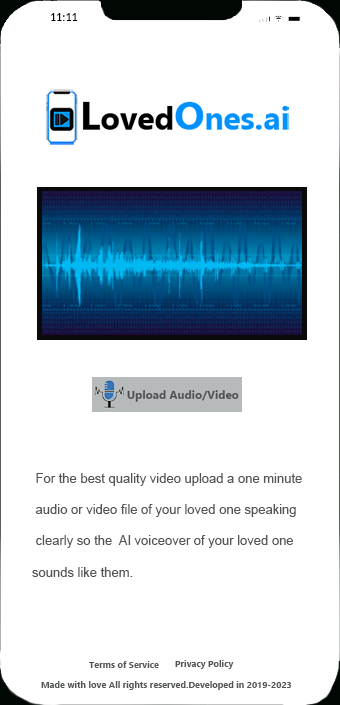
<style>
.page{position:relative;width:340px;height:705px;background:#ffffff}
.page>*{position:absolute;margin:0}
.t1{font:12px "Carlito";color:#000000}
.t2{font:13px "ArialMT";color:#525556}
.t3{font:9px "Ebrima-Bold";color:#525556}
</style>
<div class="page">
<p class="t1" style="left:50px;top:13px;width:28px;height:8px">11:11</p>
<p class="t2" style="left:32px;top:473px;width:270px;height:104px">For the best quality video upload a one minute<br><br> audio or video file of your loved one speaking<br><br> clearly so the  AI voiceover of your loved one <br><br>sounds like them.</p>
<p class="t3" style="left:89px;top:661px;width:70px;height:7px">Terms of Service</p>
<p class="t3" style="left:175px;top:660px;width:59px;height:9px">Privacy Policy</p>
<p class="t3" style="left:41px;top:681px;width:250px;height:9px">Made with love All rights reserved.Developed in 2019-2023</p>
</div>
